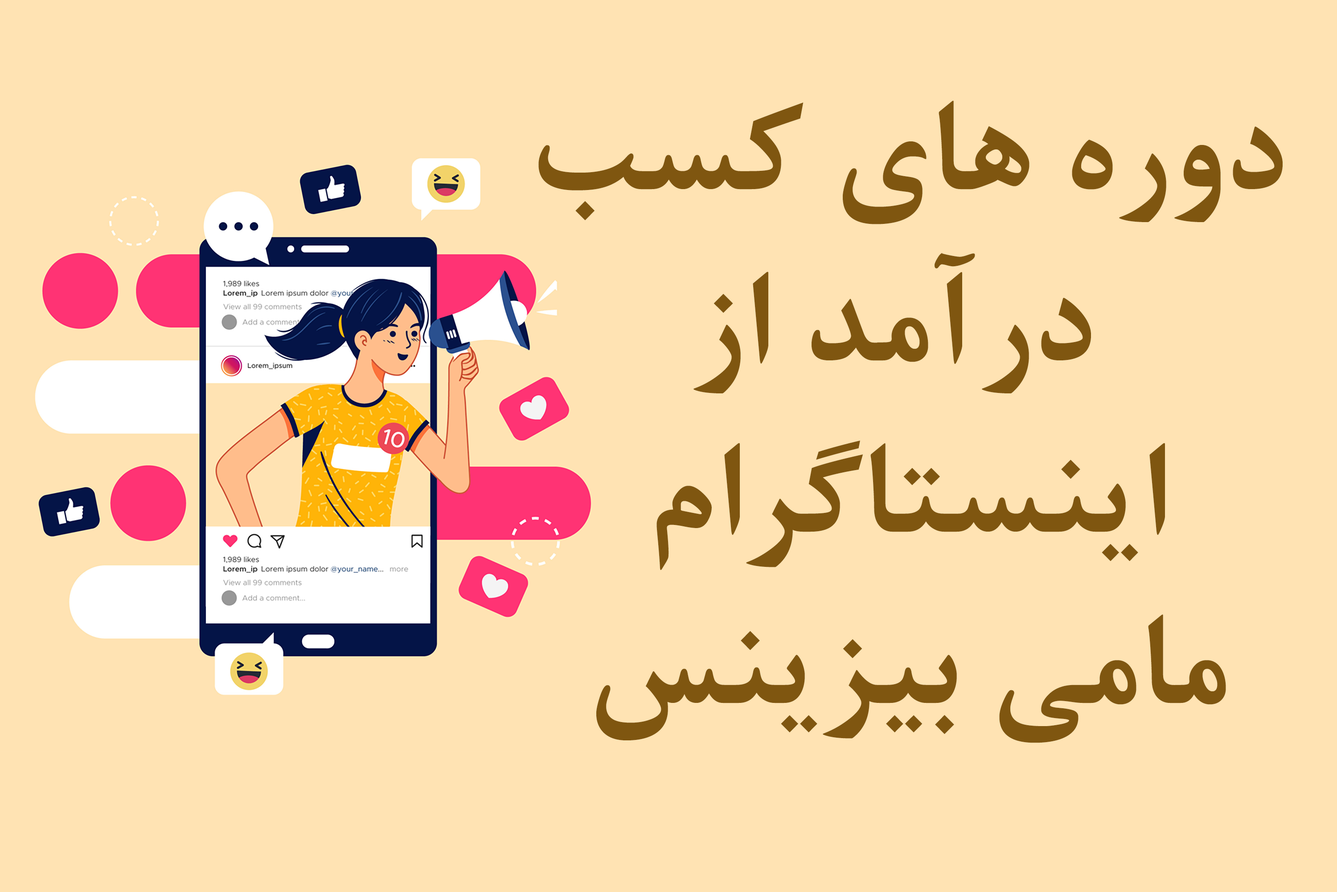
<style>
.page{position:relative;width:1337px;height:892px;background:#ffe3b3}
.page>*{position:absolute;margin:0}
.t1{font:142.7px "BNazaninBold";color:#7f5610}
</style>
<div class="page">
<p class="t1" style="left:539px;top:100px;width:744px;height:643px;text-align:center">دوره های کسب<br>درآمد از <br>اینستاگرام<br>مامی بیزینس</p>
</div>
